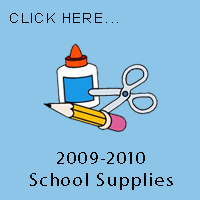
<style>
.page{position:relative;width:200px;height:200px;background:#8cc5e7}
.page>*{position:absolute;margin:0}
.t1{font:14px "ArialMT";letter-spacing:0.1em;color:#000000;text-transform:uppercase}
.t2{font:18px "MyriadPro-Regular";letter-spacing:0.1em;color:#000000}
</style>
<div class="page">
<p class="t1" style="left:10px;top:13px;width:108px;height:10px">click here...</p>
<p class="t2" style="left:30px;top:152px;width:143px;height:38px;text-align:center">2009-2010<br>School Supplies</p>
</div>
